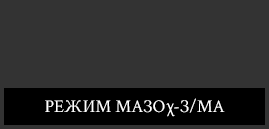
<style>
.page{position:relative;width:269px;height:129px;background:#333333}
.page>*{position:absolute;margin:0}
.t1{font:18px "CrimsonText-Regular";color:#ffffff}
</style>
<div class="page">
<p class="t1" style="left:45px;top:98px;width:180px;height:15px">РЕЖИМ МАЗО  -З/МА</p>
</div>
